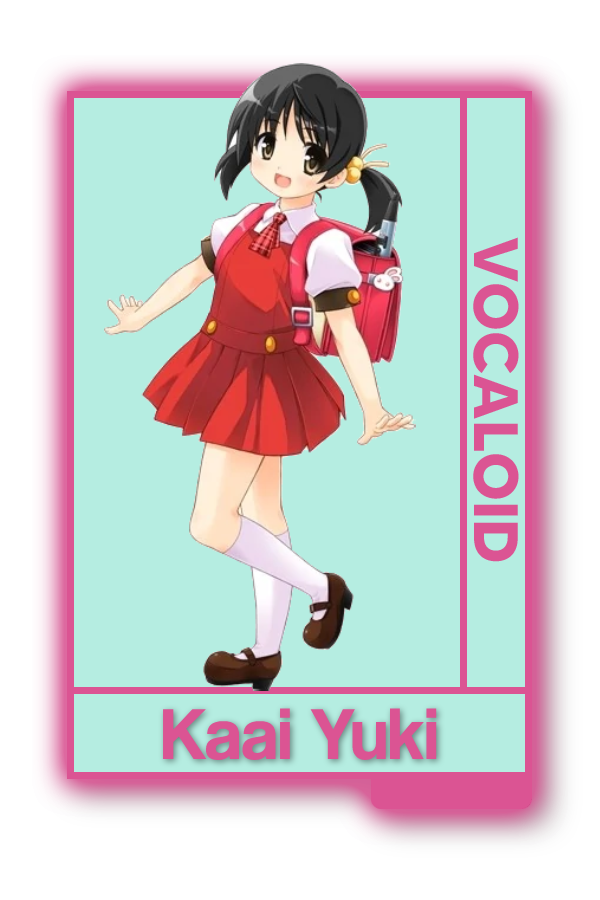
<style>
.page{position:relative;width:600px;height:900px;background:#b5ede1}
.page>*{position:absolute;margin:0}
.t1{font:62.5px "MADETOMMY-Bold";color:#db5493}
.t2{font:75px "CoolveticaRg-Regular";color:#db5493}
</style>
<div class="page">
<p class="t1" style="left:473px;top:237px;width:46px;height:325px;rotate:90deg">VOCALOID</p>
<p class="t2" style="left:163px;top:708px;width:274px;height:52px">Kaai Yuki</p>
</div>
